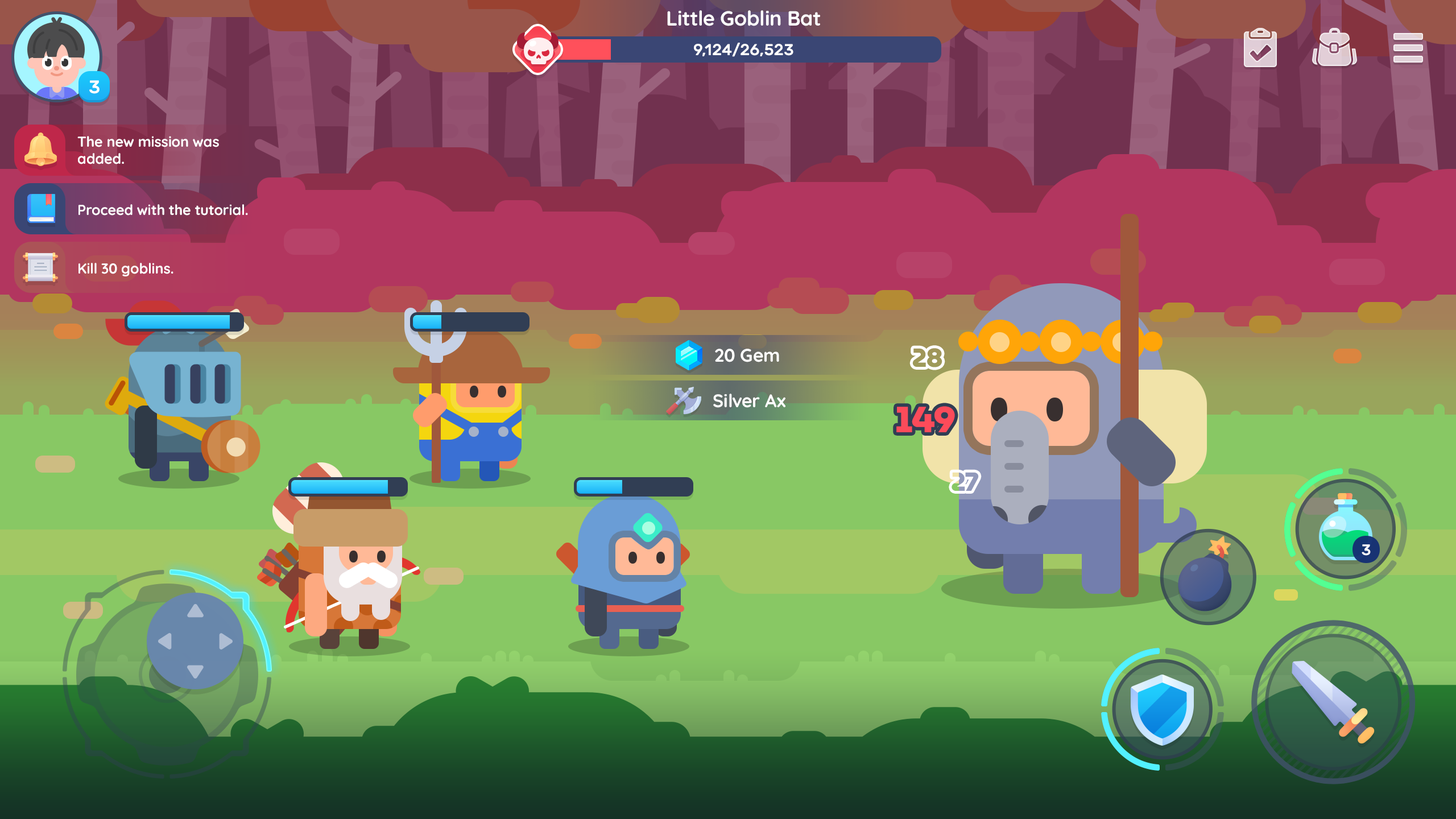
<style>
.page{position:relative;width:1456px;height:819px}
.page>*{position:absolute;margin:0}
.t1{font:20.5px "Quicksand-Bold";letter-spacing:-0.01em;color:#ffffff}
.t2{font:15.9px "Rubik-Medium";color:#ffffff}
.t3{font:18.2px "Rubik-Medium";letter-spacing:-0.01em;color:#ffffff}
.t4{font:14.3px/17.4px "Quicksand-Bold";letter-spacing:-0.01em;color:#ffffff}
.t5{font:14.3px "Quicksand-Bold";letter-spacing:-0.01em;color:#ffffff}
.t6{font:18.2px "Quicksand-Bold";letter-spacing:-0.01em;color:#ffffff}
.t7{font:26.2px "MuseoModerno-ExtraBold";letter-spacing:-0.025em;color:#9f9759}
.t8{font:36.4px "MuseoModerno-ExtraBold";letter-spacing:-0.025em;color:#fc4b5a}
.t9{font:26.2px "MuseoModerno-ExtraBold";letter-spacing:-0.025em;color:#9199ba}
.t10{font:15.2px "Rubik-Medium";letter-spacing:-0.01em;color:#ffffff;text-transform:uppercase}
</style>
<div class="page">
<p class="t1" style="left:667px;top:10px;width:153px;height:16px">Little Goblin Bat</p>
<p class="t2" style="left:694px;top:43px;width:99px;height:14px">9,124/26,523</p>
<p class="t3" style="left:89px;top:80px;width:11px;height:14px">3</p>
<p class="t4" style="left:77px;top:136px;width:142px;height:28px">The new mission was <br>added.</p>
<p class="t5" style="left:78px;top:204px;width:170px;height:12px">Proceed with the tutorial.</p>
<p class="t5" style="left:78px;top:263px;width:95px;height:13px">Kill 30 goblins.</p>
<p class="t6" style="left:715px;top:349px;width:64px;height:13px">20 Gem</p>
<p class="t7" style="left:912px;top:348px;width:30px;height:19px">28</p>
<p class="t6" style="left:713px;top:394px;width:73px;height:14px">Silver Ax</p>
<p class="t8" style="left:896px;top:406px;width:59px;height:26px">149</p>
<p class="t9" style="left:952px;top:472px;width:27px;height:19px">27</p>
<p class="t10" style="left:1362px;top:544px;width:9px;height:12px">3</p>
</div>
